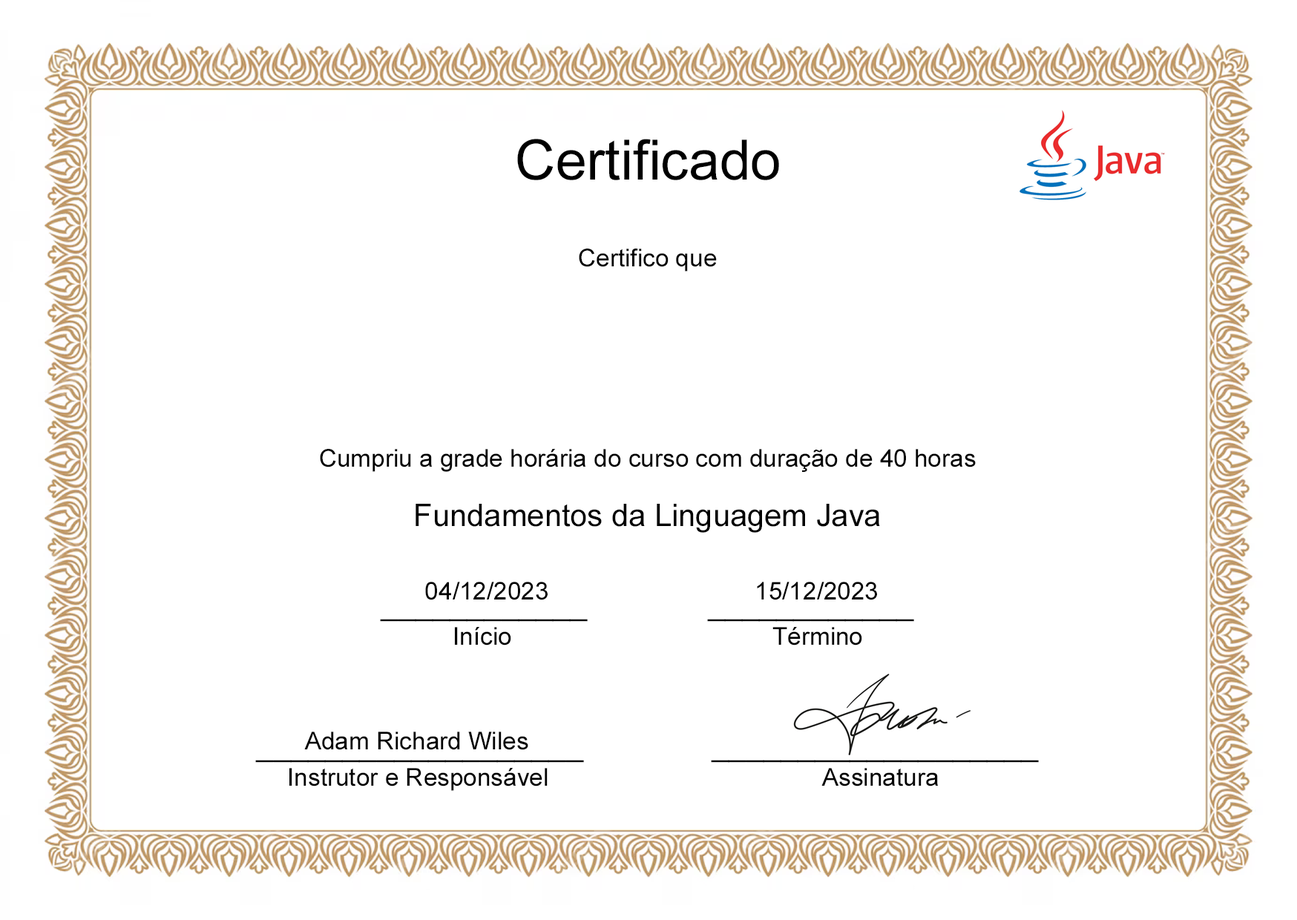
<style>
.page{position:relative;width:1297px;height:920px;background:#ffffff}
.page>*{position:absolute;margin:0}
.t1{font:55.6px "ArialMT";color:#000000}
.t2{font:24.7px "ArialMT";color:#000000}
.t3{font:30.9px "ArialMT";color:#ffffff}
.t4{font:24.7px "ArialMT";color:#ffffff}
.t5{font:30.9px "ArialMT";color:#000000}
</style>
<div class="page">
<p class="t1" style="left:517px;top:139px;width:262px;height:41px">Certificado</p>
<p class="t2" style="left:255px;top:248px;width:783px;height:543px;text-align:center">Certifico que<br><br><span class="t3">DIEGO MENDES RODRIGUES<br></span><span class="t4">CPF: 123.***.318-03<br><br></span>Cumpriu a grade horária do curso com duração de 40 horas<br><br><span class="t5">Fundamentos da Linguagem Java<br><br>____________              ____________<br></span><span class="t4">...</span>Início                                      Término<br><br><br><span class="t5">___________________               ___________________<br></span>Instrutor e Responsável                                        Assinatura<span class="t4">..........</span></p>
<p class="t2" style="left:425px;top:582px;width:452px;height:18px">04/12/2023                              15/12/2023</p>
<p class="t2" style="left:304px;top:731px;width:224px;height:19px">Adam Richard Wiles</p>
</div>
